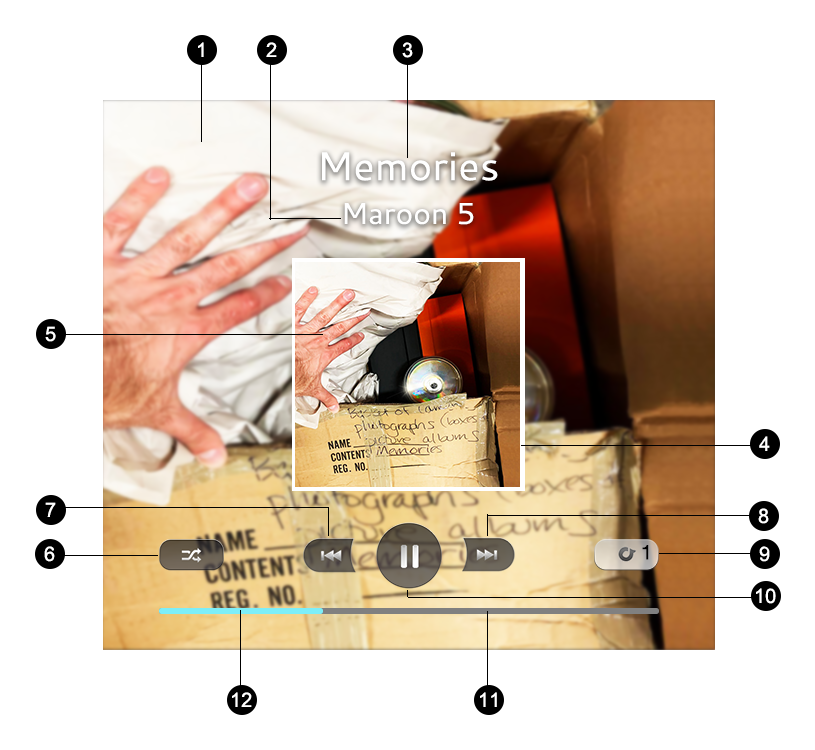
<style>
.page{position:relative;width:815px;height:750px;background:#ffffff}
.page>*{position:absolute;margin:0}
.t1{font:20px "ArialMT";color:#ffffff}
</style>
<div class="page">
<p class="t1" style="left:198px;top:42px;width:6px;height:15px">1</p>
<p class="t1" style="left:266px;top:42px;width:11px;height:15px">2</p>
<p class="t1" style="left:402px;top:42px;width:11px;height:16px">3</p>
<p class="t1" style="left:45px;top:326px;width:11px;height:16px">5</p>
<p class="t1" style="left:759px;top:436px;width:11px;height:15px">4</p>
<p class="t1" style="left:45px;top:502px;width:11px;height:15px">7</p>
<p class="t1" style="left:758px;top:508px;width:11px;height:16px">8</p>
<p class="t1" style="left:44px;top:546px;width:11px;height:16px">6</p>
<p class="t1" style="left:759px;top:546px;width:11px;height:16px">9</p>
<p class="t1" style="left:756px;top:588px;width:20px;height:16px">10</p>
<p class="t1" style="left:232px;top:692px;width:20px;height:15px">12</p>
<p class="t1" style="left:480px;top:692px;width:17px;height:15px">11</p>
</div>
